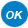
<style>
.page{position:relative;width:28px;height:28px;background:#017dc3}
.page>*{position:absolute;margin:0}
.t1{font:11px "Arial-BoldItalicMT";color:#ffffff}
</style>
<div class="page">
<p class="t1" style="left:6px;top:11px;width:17px;height:8px">OK</p>
</div>
